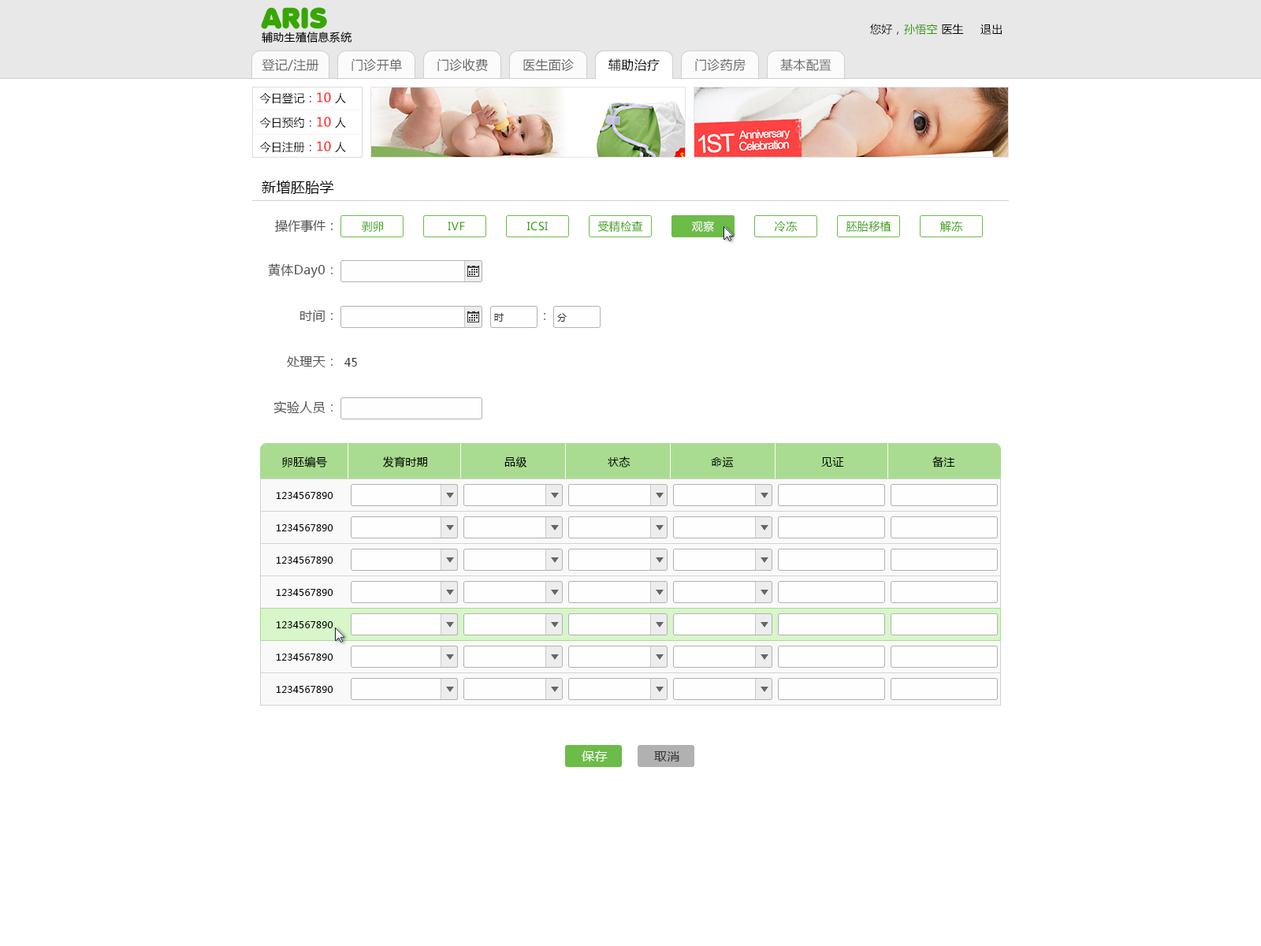
<style>
.page{position:relative;width:1261px;height:946px;background:#ffffff}
.page>*{position:absolute;margin:0}
.t1{font:14.2px "MicrosoftYaHei";letter-spacing:0.022em;color:#000000}
.t2{font:12.6px "MicrosoftYaHei";color:#4f4f4f}
.t3{font:11px "MicrosoftYaHei";letter-spacing:0.022em;color:#32a000}
.t4{font:11px "MicrosoftYaHei";letter-spacing:0.022em;color:#ffffff}
.t5{font:12.6px "MicrosoftYaHei";letter-spacing:0.022em;color:#4f4f4f}
.t6{font:12.6px "MicrosoftYaHei";color:#666666}
.t7{font:9.5px "MicrosoftYaHei";letter-spacing:0.022em;color:#333333}
.t8{font:12.6px "MicrosoftYaHei"}
.t9{font:11px "MicrosoftYaHei";letter-spacing:0.022em;color:#333333}
.t10{font:11px "MicrosoftYaHei";letter-spacing:0.022em;color:#000000}
.t11{font:9.5px "MicrosoftYaHei";letter-spacing:0.022em;color:#000000}
.t12{font:12.6px "MicrosoftYaHei";letter-spacing:0.022em;color:#ffffff}
.t13{font:12.6px "MicrosoftYaHei";letter-spacing:0.022em;color:#333333}
</style>
<div class="page">
<p class="t1" style="left:262px;top:180px;width:72px;height:14px">新增胚胎学</p>
<p class="t2" style="left:275px;top:219px;width:58px;height:13px">操作事件：</p>
<p class="t3" style="left:362px;top:221px;width:21px;height:11px">剥卵</p>
<p class="t3" style="left:448px;top:221px;width:17px;height:9px">IVF</p>
<p class="t3" style="left:527px;top:221px;width:21px;height:10px">ICSI</p>
<p class="t3" style="left:597px;top:221px;width:46px;height:11px">受精检查</p>
<p class="t4" style="left:691px;top:221px;width:23px;height:11px">观察</p>
<p class="t4" style="left:691px;top:221px;width:23px;height:11px">观察</p>
<p class="t3" style="left:775px;top:221px;width:23px;height:11px">冷冻</p>
<p class="t3" style="left:846px;top:221px;width:45px;height:11px">胚胎移植</p>
<p class="t3" style="left:940px;top:221px;width:23px;height:11px">解冻</p>
<p class="t5" style="left:268px;top:263px;width:65px;height:14px">黄体Day0<span class="t6">：</span></p>
<p class="t5" style="left:300px;top:310px;width:33px;height:12px">时间<span class="t6">：</span></p>
<p class="t7" style="left:494px;top:313px;width:10px;height:9px">时</p>
<p class="t8" style="left:544px;top:313px;width:1px;height:7px">：</p>
<p class="t7" style="left:557px;top:313px;width:10px;height:9px">分</p>
<p class="t5" style="left:287px;top:356px;width:46px;height:11px">处理天<span class="t6">：</span></p>
<p class="t9" style="left:344px;top:358px;width:13px;height:8px">45</p>
<p class="t5" style="left:273px;top:400px;width:60px;height:14px">实验人员<span class="t6">：</span></p>
<p class="t10" style="left:282px;top:456px;width:45px;height:11px">卵胚编号</p>
<p class="t10" style="left:383px;top:456px;width:44px;height:11px">发育时期</p>
<p class="t10" style="left:504px;top:456px;width:23px;height:11px">品级</p>
<p class="t10" style="left:608px;top:456px;width:22px;height:11px">状态</p>
<p class="t10" style="left:711px;top:456px;width:23px;height:11px">命运</p>
<p class="t10" style="left:821px;top:457px;width:23px;height:10px">见证</p>
<p class="t10" style="left:932px;top:456px;width:23px;height:11px">备注</p>
<p class="t11" style="left:276px;top:492px;width:57px;height:7px">1234567890</p>
<p class="t11" style="left:276px;top:524px;width:57px;height:7px">1234567890</p>
<p class="t11" style="left:276px;top:556px;width:57px;height:7px">1234567890</p>
<p class="t11" style="left:276px;top:589px;width:57px;height:7px">1234567890</p>
<p class="t11" style="left:276px;top:621px;width:57px;height:7px">1234567890</p>
<p class="t11" style="left:276px;top:653px;width:57px;height:7px">1234567890</p>
<p class="t11" style="left:276px;top:686px;width:57px;height:7px">1234567890</p>
<p class="t12" style="left:582px;top:750px;width:26px;height:11px">保存</p>
<p class="t13" style="left:654px;top:751px;width:25px;height:10px">取消</p>
</div>
